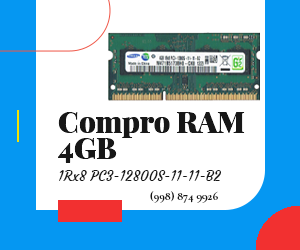
<style>
.page{position:relative;width:300px;height:250px;background:#ffffff}
.page>*{position:absolute;margin:0}
.t1{font:29px/26px "PlayfairDisplay-Black";color:#171717}
.t2{font:14px "Courgette-Regular";color:#171717}
.t3{font:12px "Cormorant-Bold";color:#171717}
</style>
<div class="page">
<p class="t1" style="left:58px;top:112px;width:187px;height:51px">Compro RAM<br>4GB</p>
<p class="t2" style="left:59px;top:170px;width:162px;height:11px">1Rx8 PC3-12800S-11-11-B2</p>
<p class="t3" style="left:150px;top:191px;width:68px;height:12px">(998) 874 9926</p>
</div>
